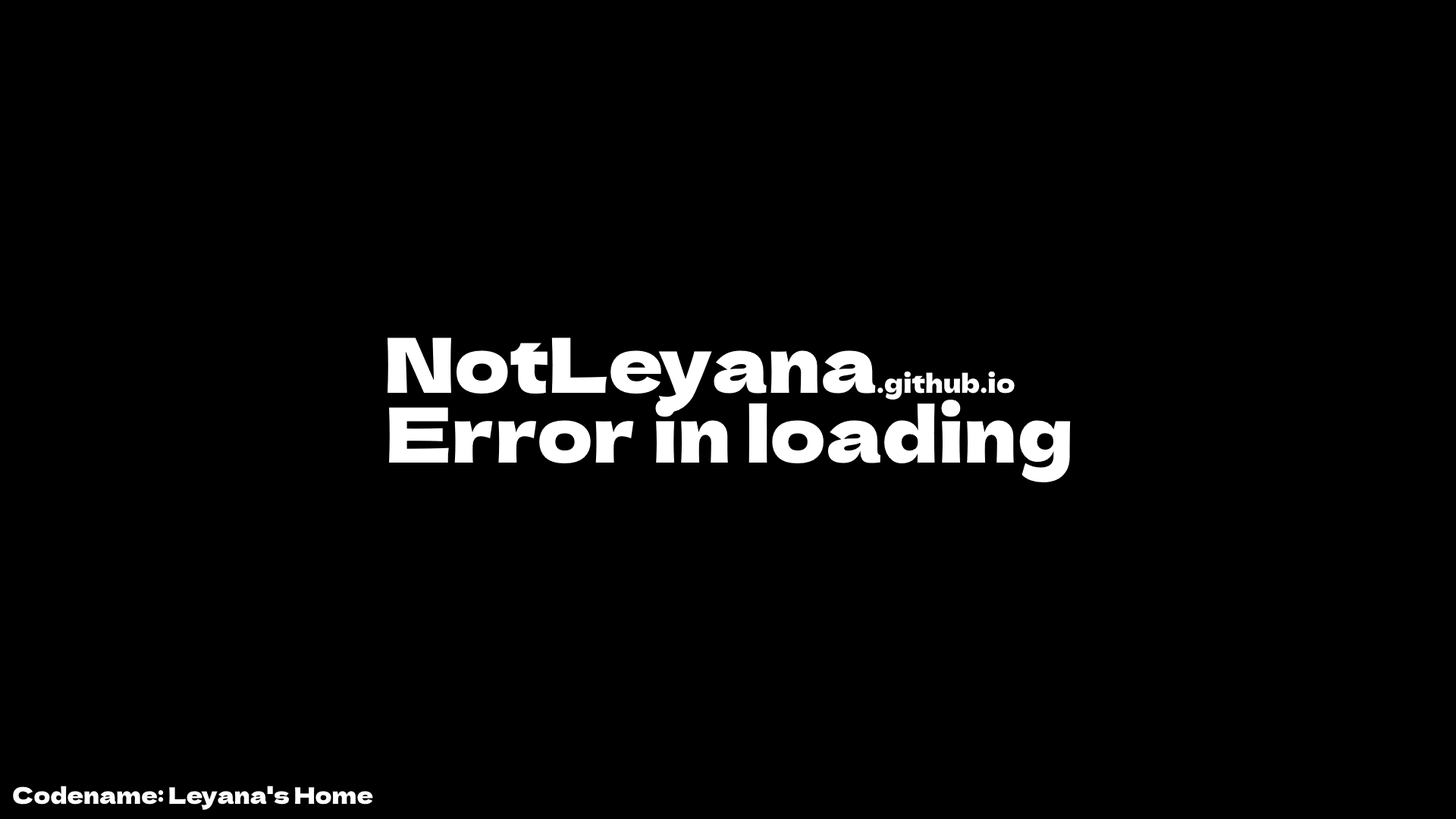
<style>
.page{position:relative;width:1456px;height:819px;background:#000000}
.page>*{position:absolute;margin:0}
.t1{font:25.8px "DelaGothicOne-Regular";color:#ffffff}
.t2{font:75.8px "DelaGothicOne-Regular";color:#ffffff}
.t3{font:22.7px "DelaGothicOne-Regular";color:#ffffff}
</style>
<div class="page">
<p class="t1" style="left:388px;top:337px;width:627px;height:76px"><span class="t2">NotLeyana</span>.github.io</p>
<p class="t2" style="left:389px;top:400px;width:682px;height:82px">Error in loading</p>
<p class="t3" style="left:13px;top:786px;width:360px;height:24px">Codename: Leyana's Home</p>
</div>
